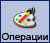
<style>
.page{position:relative;width:50px;height:43px;background:#b9c2dc}
.page>*{position:absolute;margin:0}
.t1{font:10px "ArialMT";color:#000000}
</style>
<div class="page">
<p class="t1" style="left:1px;top:33px;width:47px;height:9px">Операции</p>
</div>
